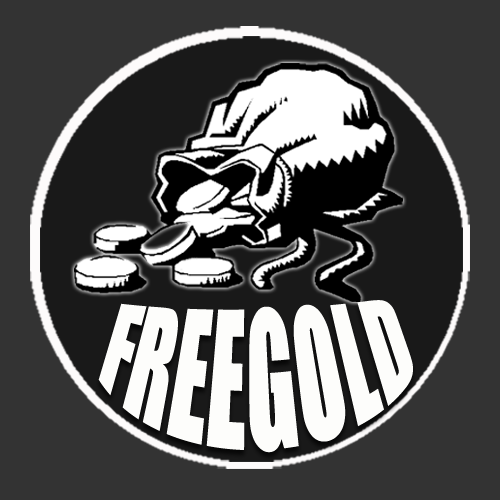
<style>
.page{position:relative;width:500px;height:500px;background:#333333}
.page>*{position:absolute;margin:0}
.t1{font:91.2px "Impact";color:#fdfefe}
</style>
<div class="page">
<p class="t1" style="left:98px;top:300px;width:315px;height:153px;rotate:-1deg">FREEGOLD</p>
</div>
